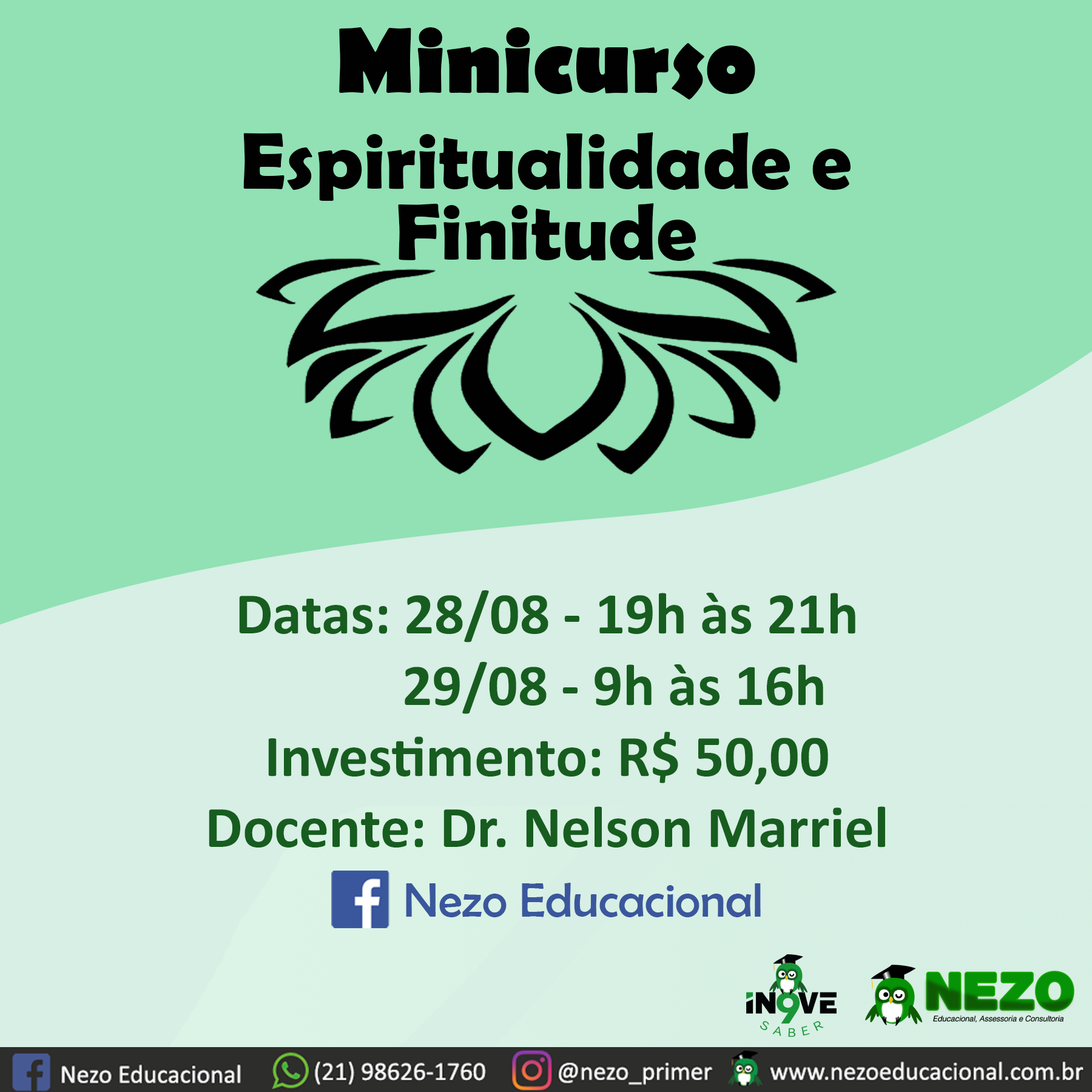
<style>
.page{position:relative;width:1092px;height:1092px;background:#91e1b4}
.page>*{position:absolute;margin:0}
.t1{font:80.9px/96.1px "BerlinSansFBDemi-Bold";color:#010101}
.t2{font:93.5px/106.2px "BerlinSansFB-Bold";color:#010101}
.t3{font:80.9px/70.8px "BerlinSansFBDemi-Bold";color:#010101}
.t4{font:59.3px "Calibri-Bold";color:#175d1f}
.t5{font:48.7px "BerlinSansFB-Reg";color:#3a579d}
</style>
<div class="page">
<p class="t1" style="left:243px;top:27px;width:608px;height:234px;text-align:center"><span class="t2">Minicurso<br></span>Espiritualidade e <span class="t3">Finitude</span></p>
<p class="t4" style="left:209px;top:590px;width:676px;height:258px;text-align:center">Datas: 28/08 - 19h às 21h<br>     29/08 - 9h às 16h<br>Investimento: R$ 50,00<br>Docente: Dr. Nelson Marriel</p>
<p class="t5" style="left:406px;top:883px;width:355px;height:34px">Nezo Educacional</p>
</div>
